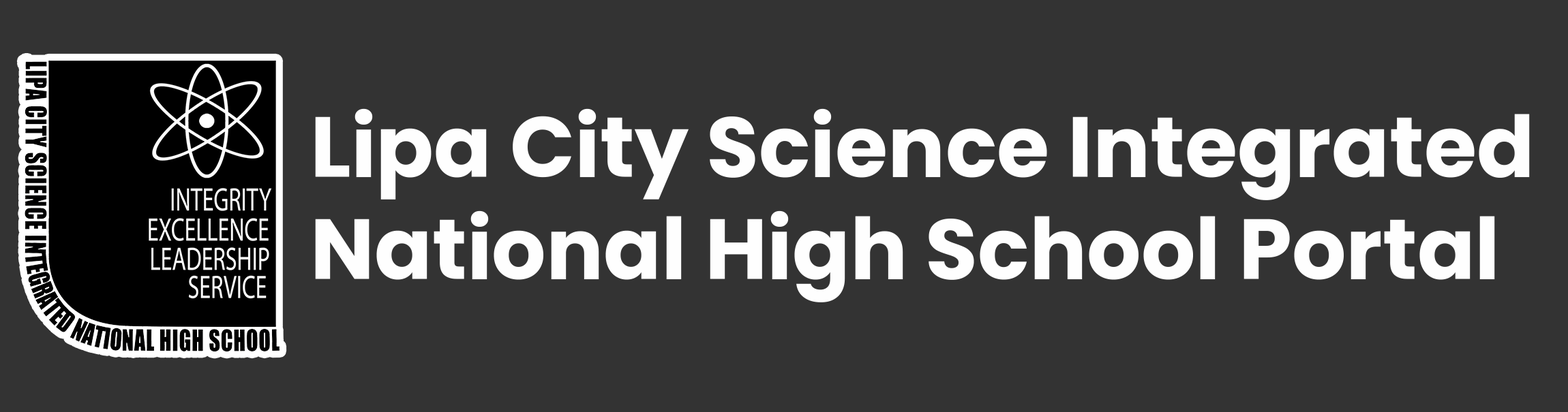
<style>
.page{position:relative;width:1568px;height:412px;background:#333333}
.page>*{position:absolute;margin:0}
.t1{font:85.2px "Poppins-Bold";color:#fefefe}
</style>
<div class="page">
<p class="t1" style="left:315px;top:108px;width:1215px;height:195px">Lipa City Science Integrated<br>National High School Portal</p>
</div>
